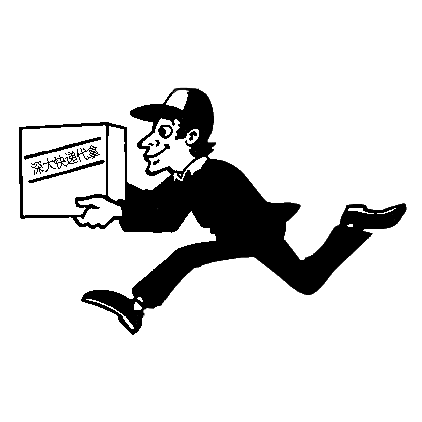
<style>
.page{position:relative;width:422px;height:422px;background:#ffffff}
.page>*{position:absolute;margin:0}
.t1{font:13.4px "MicrosoftYaHei";letter-spacing:-0.038em;color:#000000;scale:0.86 1}
</style>
<div class="page">
<p class="t1" style="left:31px;top:145px;width:69px;height:30px;rotate:-17deg">深大快递代拿</p>
</div>
